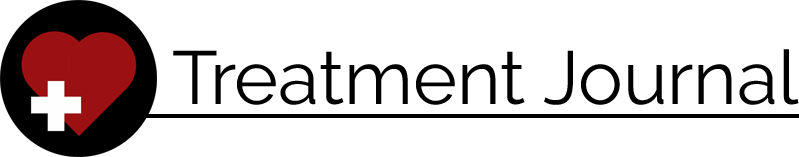
<style>
.page{position:relative;width:799px;height:157px;background:#ffffff}
.page>*{position:absolute;margin:0}
.t1{font:75px "Raleway-Regular";color:#000000}
</style>
<div class="page">
<p class="t1" style="left:173px;top:49px;width:626px;height:56px">Treatment Journal</p>
</div>
